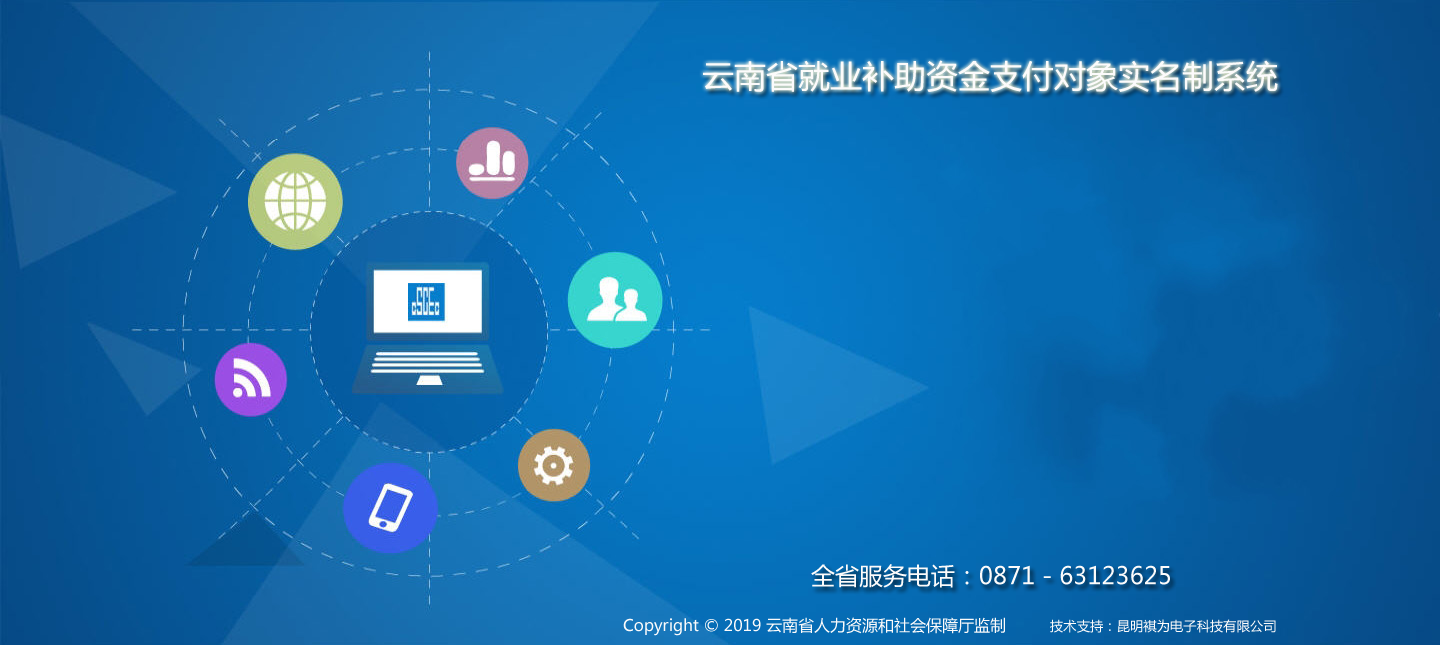
<style>
.page{position:relative;width:1440px;height:645px}
.page>*{position:absolute;margin:0}
.t1{font:32px "MicrosoftYaHei";color:#fcfbfb}
.t2{font:24px "MicrosoftYaHei";color:#fcfbfb}
.t3{font:16px "MicrosoftYaHei";color:#fcfbfb}
.t4{font:13.3px "MicrosoftYaHei";color:#fcfbfb}
</style>
<div class="page">
<p class="t1" style="left:703px;top:60px;width:575px;height:32px">云南省就业补助资金支付对象实名制系统</p>
<p class="t2" style="left:811px;top:564px;width:359px;height:24px">全省服务电话：0871－63123625</p>
<p class="t3" style="left:623px;top:617px;width:382px;height:19px">Copyright © 2019 云南省人力资源和社会保障厅监制</p>
<p class="t4" style="left:1050px;top:619px;width:226px;height:14px">技术支持：昆明褀为电子科技有限公司</p>
</div>
